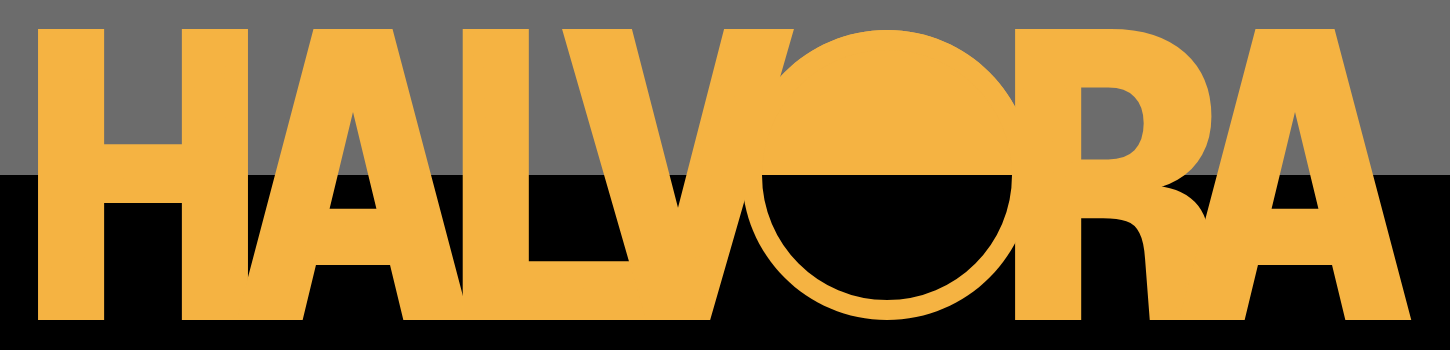
<style>
.page{position:relative;width:1450px;height:350px;background:#f5b342}
.page>*{position:absolute;margin:0}
.t1{font:410px "GeistMono-ExtraBold";color:#f5b342}
</style>
<div class="page">
<p class="t1" style="left:38px;top:28px;width:210px;height:293px">H</p>
<p class="t1" style="left:236px;top:28px;width:234px;height:293px">A</p>
<p class="t1" style="left:462px;top:28px;width:188px;height:293px">L</p>
<p class="t1" style="left:562px;top:28px;width:232px;height:293px">V</p>
<p class="t1" style="left:1015px;top:28px;width:202px;height:293px">R</p>
<p class="t1" style="left:1178px;top:28px;width:234px;height:293px">A</p>
</div>
